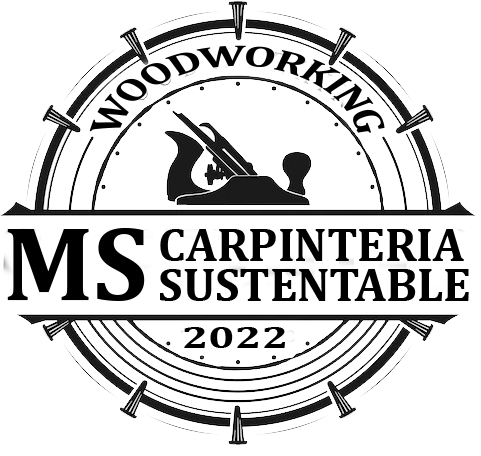
<style>
.page{position:relative;width:481px;height:456px;background:#ffffff}
.page>*{position:absolute;margin:0}
.t1{font:29.8px/51.5px "Cambria-Bold";color:#000000;scale:0.95 1}
.t2{font:106.7px "Cambria-Bold";color:#000000}
.t3{font:47.7px/40px "Cambria-Bold";color:#000000}
.t4{font:32px "Cambria-Bold";color:#000000;scale:1.4 1}
</style>
<div class="page">
<p class="t1" style="left:89px;top:45px;width:296px;height:88px;text-align:center">WOODWORKING</p>
<p class="t2" style="left:7px;top:228px;width:138px;height:73px">MS</p>
<p class="t3" style="left:160px;top:229px;width:309px;height:72px">CARPINTERIA<br>SUSTENTABLE</p>
<p class="t4" style="left:184px;top:327px;width:101px;height:21px">2022</p>
</div>
